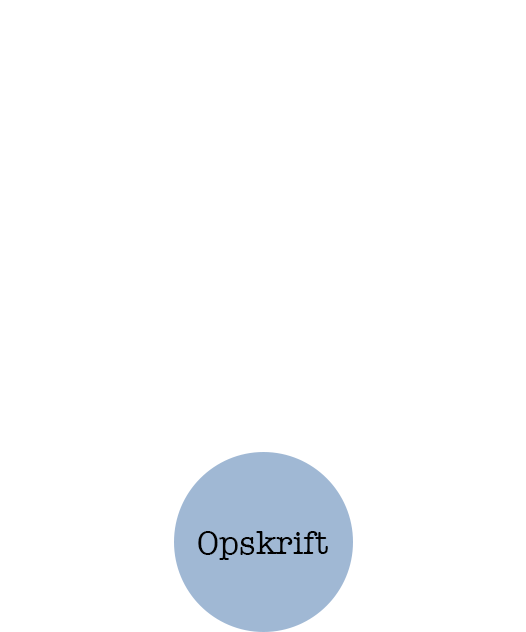
<style>
.page{position:relative;width:526px;height:632px;background:#ffffff}
.page>*{position:absolute;margin:0}
.t1{font:33.3px "AmericanTypewriter";color:#000000}
</style>
<div class="page">
<p class="t1" style="left:198px;top:531px;width:130px;height:29px">Opskrift</p>
</div>
